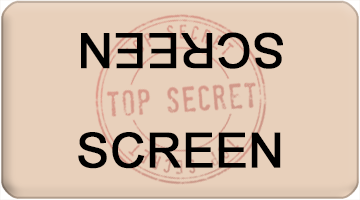
<style>
.page{position:relative;width:360px;height:200px;background:#e8d0bb}
.page>*{position:absolute;margin:0}
.t1{font:48px "ArialMT";color:#000000;font-weight:bold}
</style>
<div class="page">
<p class="t1" style="left:81px;top:32px;width:202px;height:37px;rotate:180deg">SCREEN</p>
<p class="t1" style="left:78px;top:132px;width:203px;height:37px">SCREEN</p>
</div>
